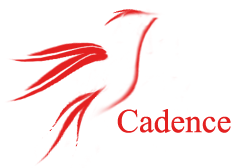
<style>
.page{position:relative;width:249px;height:168px;background:#ffffff}
.page>*{position:absolute;margin:0}
.t1{font:33.3px "TimesNewRomanPSMT";color:#e32020}
</style>
<div class="page">
<p class="t1" style="left:117px;top:109px;width:114px;height:24px">Cadence</p>
</div>
